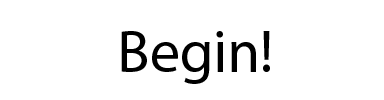
<style>
.page{position:relative;width:384px;height:100px;background:#ffffff}
.page>*{position:absolute;margin:0}
.t1{font:60px "MyriadPro-Regular";color:#000000}
</style>
<div class="page">
<p class="t1" style="left:121px;top:31px;width:149px;height:53px">Begin!</p>
</div>
